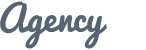
<style>
.page{position:relative;width:146px;height:50px;background:#ffffff}
.page>*{position:absolute;margin:0}
.t1{font:36px "Pacifico-Regular";color:#566473}
</style>
<div class="page">
<p class="t1" style="left:0px;top:1px;width:107px;height:48px">Agency</p>
</div>
